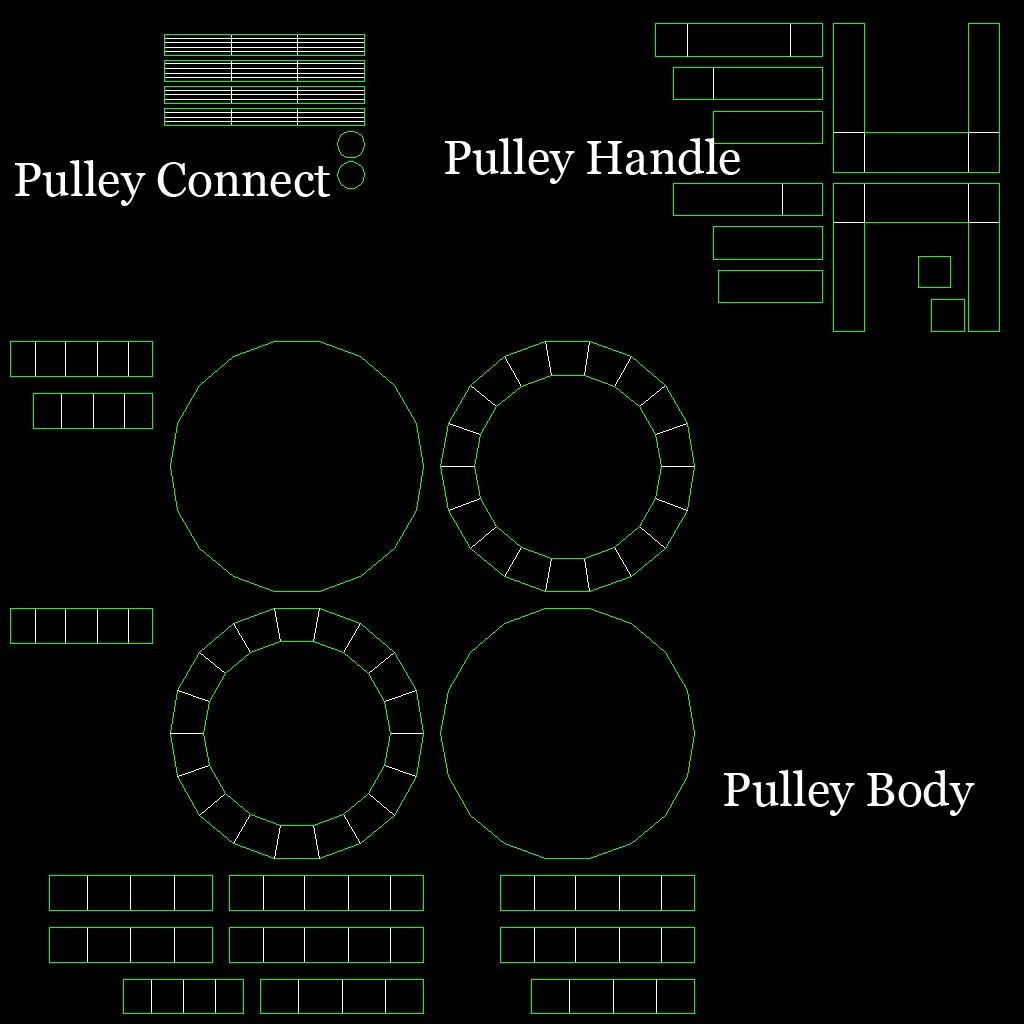
<style>
.page{position:relative;width:1024px;height:1024px;background:#000000}
.page>*{position:absolute;margin:0}
.t1{font:48px "Georgia";color:#ffffff}
</style>
<div class="page">
<p class="t1" style="left:445px;top:138px;width:296px;height:46px">Pulley Handle</p>
<p class="t1" style="left:15px;top:160px;width:315px;height:46px">Pulley Connect</p>
<p class="t1" style="left:724px;top:770px;width:251px;height:46px">Pulley Body</p>
</div>
